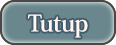
<style>
.page{position:relative;width:116px;height:45px;background:#69878c}
.page>*{position:absolute;margin:0}
.t1{font:24px "HeiseiMinStd-W7";color:#fff6f2}
</style>
<div class="page">
<p class="t1" style="left:27px;top:14px;width:61px;height:24px">Tutup</p>
</div>
